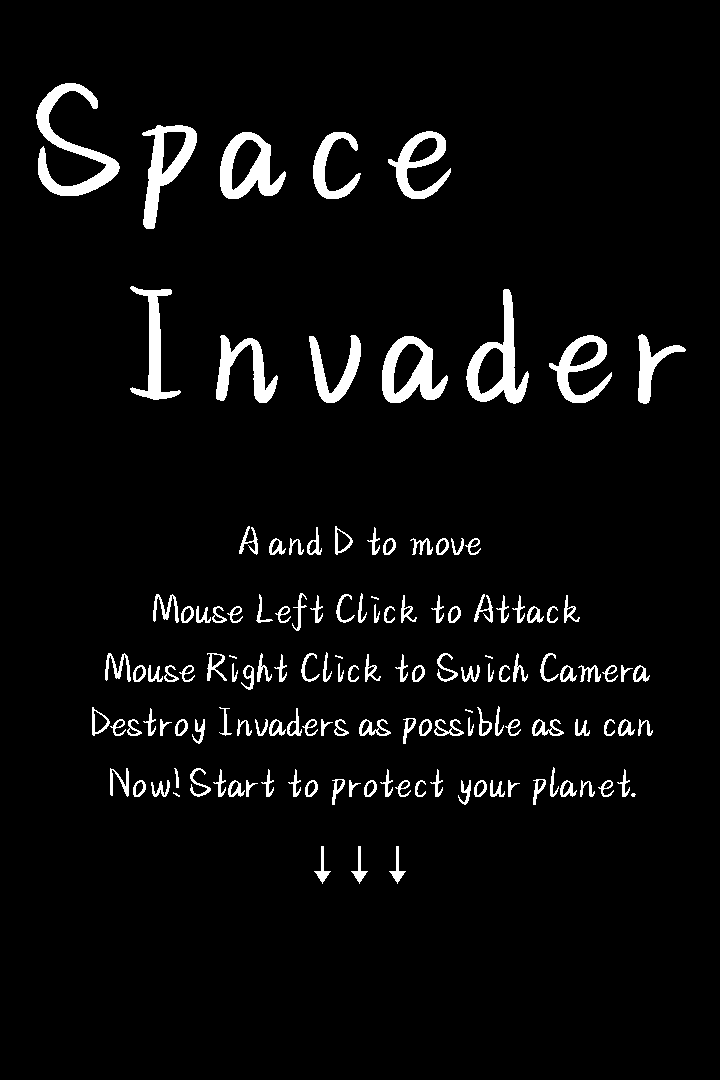
<style>
.page{position:relative;width:720px;height:1080px;background:#000000}
.page>*{position:absolute;margin:0}
.t1{font:41.7px "NHWDXYQH";letter-spacing:-0.1em;color:#ffffff}
.t2{font:41.7px "AdobeHeitiStd-Regular";letter-spacing:-0.1em;color:#ffffff}
</style>
<div class="page">
<p class="t1" style="left:239px;top:526px;width:242px;height:29px">A and D to move</p>
<p class="t1" style="left:153px;top:593px;width:427px;height:38px">Mouse Left Click to Attack</p>
<p class="t1" style="left:105px;top:652px;width:545px;height:38px">Mouse Right Click to Swich Camera</p>
<p class="t1" style="left:92px;top:706px;width:561px;height:38px">Destroy Invaders as possible as u can</p>
<p class="t1" style="left:110px;top:767px;width:526px;height:38px">Now! Start to protect your planet.</p>
<p class="t2" style="left:314px;top:846px;width:92px;height:38px">↓↓↓</p>
</div>
